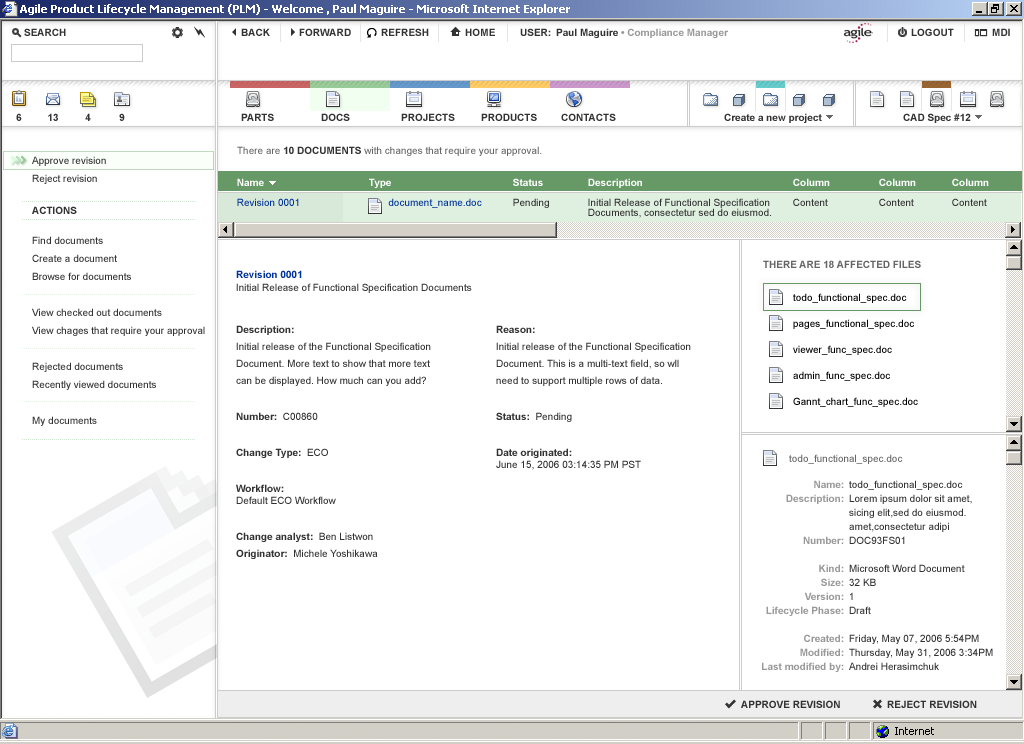
<style>
.page{position:relative;width:1024px;height:744px;background:#ffffff}
.page>*{position:absolute;margin:0}
.t1{font:10px "ArialMT";color:#666666}
.t2{font:10px "Arial-BoldMT";color:#333333}
.t3{font:10px/18px "ArialMT";color:#333333}
.t4{font:10px/10px "ArialMT";color:#333333}
.t5{font:10px "Arial-BoldMT";color:#ffffff}
.t6{font:10px/8px "Arial-BoldMT";color:#ffffff}
.t7{font:10px/13px "ArialMT";color:#333333}
.t8{font:10px/12px "Arial-BoldMT";color:#003399}
.t9{font:10px "Arial-BoldMT";color:#666666;text-transform:uppercase}
.t10{font:10px/26px "ArialMT";color:#000000}
.t11{font:10px/12px "ArialMT";color:#333333}
.t12{font:10px/12px "Arial-BoldMT";color:#333333}
.t13{font:10px/14px "Arial-BoldMT";color:#999999}
.t14{font:10px/14px "ArialMT";color:#333333}
</style>
<div class="page">
<p class="t1" style="left:237px;top:146px;width:305px;height:10px">There are <span class="t2">10 DOCUMENTS </span>with changes that require your approval.</p>
<p class="t3" style="left:32px;top:156px;width:74px;height:28px">Approve revision<br>Reject revision</p>
<p class="t4" style="left:588px;top:178px;width:183px;height:40px"><span class="t5">De</span><span class="t6">scription<br></span><br>Initial Release of Functional Specification<br>Documents, consectetur sed do eiusmod.</p>
<p class="t2" style="left:32px;top:206px;width:45px;height:8px">ACTIONS</p>
<p class="t3" style="left:32px;top:236px;width:173px;height:190px">Find documents<br>Create a document<br>Browse for documents<br><br>View checked out documents<br>View chages that require your approval<br><br>Rejected documents<br>Recently viewed documents<br><br>My documents</p>
<p class="t7" style="left:236px;top:270px;width:236px;height:23px"><span class="t8">Revision 0001<br></span>Initial Release of Functional Specification Documents</p>
<p class="t9" style="left:763px;top:260px;width:158px;height:8px">There are 18 affected files</p>
<p class="t10" style="left:793px;top:293px;width:125px;height:114px">todo_functional_spec.doc<br>pages_functional_spec.doc<br>viewer_func_spec.doc<br>admin_func_spec.doc<br>Gannt_chart_func_spec.doc</p>
<p class="t11" style="left:236px;top:325px;width:195px;height:234px"><span class="t12">Description:<br></span>Initial release of the Functional Specification<br>Document. More text to show that more text<br>can be displayed. How much can you add?<br><span class="t12"><br><br>Number:  </span>C00860<br><span class="t12"><br><br>Change Type:  </span>ECO<br><br><span class="t12"><br>Workflow:<br></span>Default ECO Workflow<br><br><span class="t12"><br>Change analyst:  </span>Ben Listwon<span class="t12"><br>Originator:  </span>Michele Yoshikawa</p>
<p class="t11" style="left:496px;top:325px;width:195px;height:145px"><span class="t12">Reason:<br></span>Initial release of the Functional Specification<br>Document. This is a multi-text field, so wll<br>need to support multiple rows of data.<br><span class="t12"><br><br>Status:  </span>Pending<br><span class="t12"><br><br>Date originated:  <br></span>June 15, 2006 03:14:35 PM PST</p>
<p class="t1" style="left:789px;top:454px;width:114px;height:10px">todo_functional_spec.doc</p>
<p class="t13" style="left:762px;top:480px;width:82px;height:192px;text-align:right">Name:<br>Description:<br><br><br>Number:<br><br>Kind:<br>Size:<br>Version:<br>Lifecycle Phase:<br><br>Created:<br>Modified:<br>Last modified by:</p>
<p class="t14" style="left:849px;top:480px;width:144px;height:190px">todo_functional_spec.doc<br>Lorem ipsum dolor sit amet,<br>sicing elit,sed do eiusmod. <br>amet,consectetur adipi <br>DOC93FS01<br><br>Microsoft Word Document<br>32 KB<br>1<br>Draft<br><br>Friday, May 07, 2006 5:54PM<br>Thursday, May 31, 2006 3:34PM<br>Andrei Herasimchuk</p>
<p class="t2" style="left:741px;top:700px;width:99px;height:8px">APPROVE REVISION</p>
<p class="t2" style="left:887px;top:700px;width:90px;height:8px">REJECT REVISION</p>
</div>
